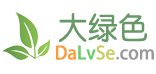
<style>
.page{position:relative;width:156px;height:74px;background:#ffffff}
.page>*{position:absolute;margin:0}
.t1{font:30px "STYuanti-SC-Regular";color:#669966}
.t2{font:18px "AdobeHeitiStd-Regular";color:#999999}
.t3{font:18px "AdobeHeitiStd-Regular";color:#ff9933}
.t4{font:18px "AdobeHeitiStd-Regular";color:#66cc66}
.t5{font:18px "AdobeHeitiStd-Regular";color:#cccc66}
</style>
<div class="page">
<p class="t1" style="left:58px;top:13px;width:89px;height:29px">大绿色</p>
<p class="t2" style="left:56px;top:45px;width:98px;height:15px"><span class="t3">Da</span><span class="t4">Lv</span><span class="t5">Se</span>.com</p>
</div>
